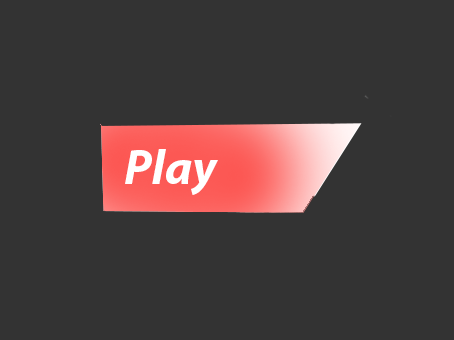
<style>
.page{position:relative;width:454px;height:340px;background:#333333}
.page>*{position:absolute;margin:0}
.t1{font:49px "MyriadPro-BoldIt";color:#ffffff}
</style>
<div class="page">
<p class="t1" style="left:125px;top:149px;width:93px;height:46px">Play</p>
</div>
